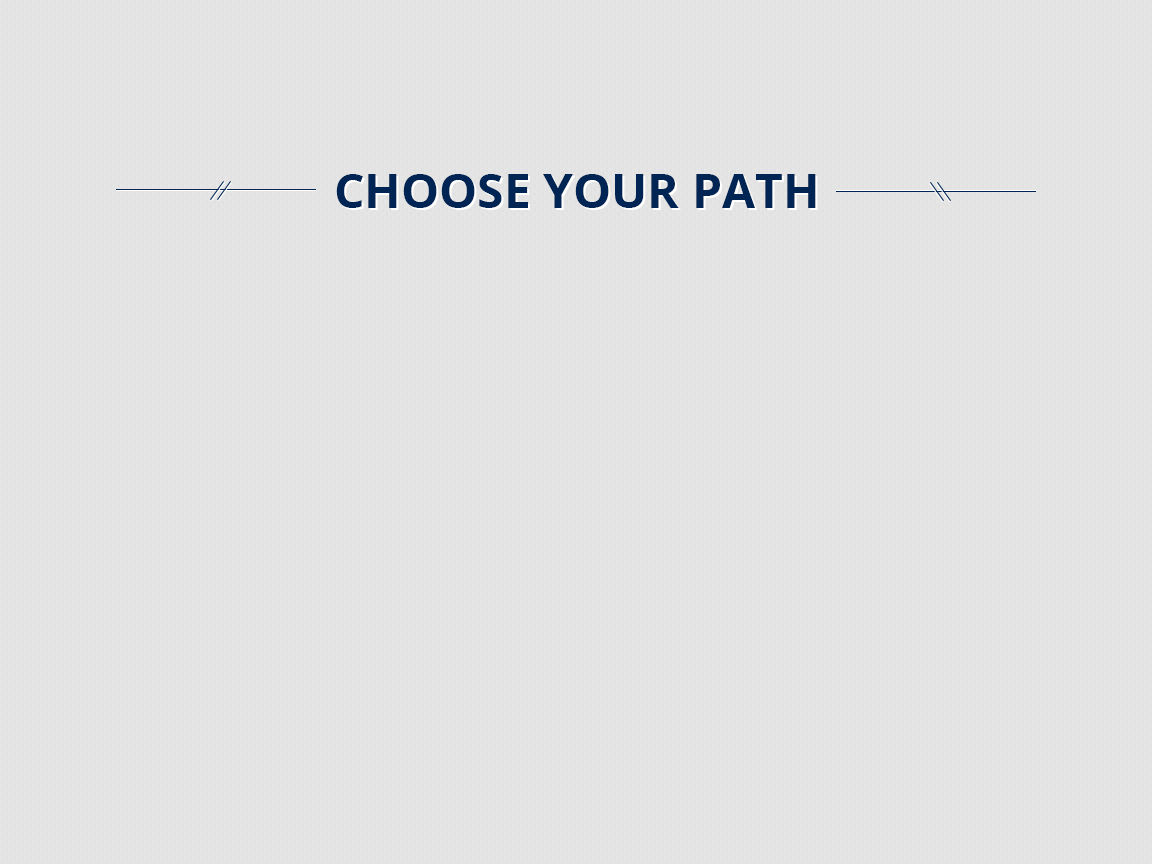
<style>
.page{position:relative;width:1152px;height:864px;background:#e4e4e4}
.page>*{position:absolute;margin:0}
.t1{font:48px "OpenSans-Bold";color:#002554}
.t2{font:48px "OpenSans-Bold"}
</style>
<div class="page">
<p class="t1" style="left:336px;top:174px;width:480px;height:34px">CHOOSE YOUR PATH</p>
<p class="t2" style="left:338px;top:176px;width:480px;height:34px">CHOOSE YOUR PATH</p>
</div>
